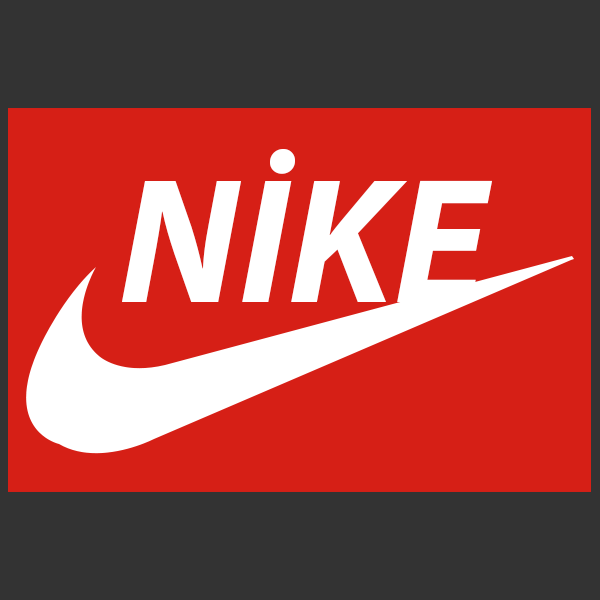
<style>
.page{position:relative;width:600px;height:600px;background:#d61f16}
.page>*{position:absolute;margin:0}
.t1{font:180px "MyriadPro-BoldIt";color:#ffffff}
</style>
<div class="page">
<p class="t1" style="left:122px;top:149px;width:370px;height:154px">NİKE</p>
</div>
